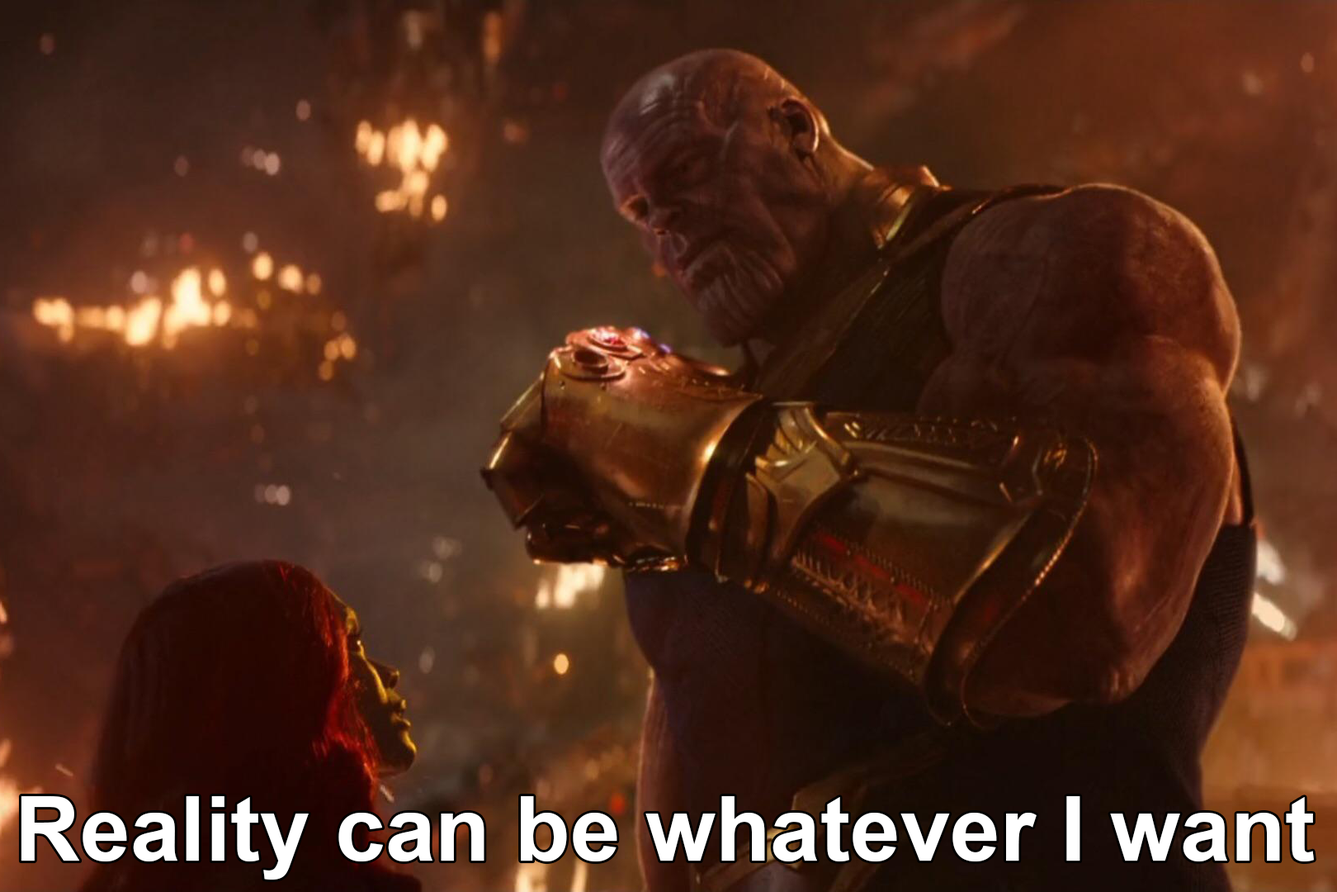
<style>
.page{position:relative;width:1337px;height:892px}
.page>*{position:absolute;margin:0}
.t1{font:90px "Arial-BoldMT";color:#ffffff}
</style>
<div class="page">
<p class="t1" style="left:21px;top:796px;width:1293px;height:83px">Reality can be whatever I want</p>
</div>
